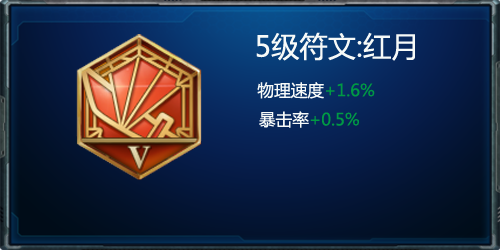
<style>
.page{position:relative;width:500px;height:250px}
.page>*{position:absolute;margin:0}
.t1{font:28.3px "MicrosoftYaHei";color:#f7faf8}
.t2{font:16.7px "MicrosoftYaHei";color:#f7faf8}
.t3{font:16.7px "MicrosoftYaHei";color:#009944}
</style>
<div class="page">
<p class="t1" style="left:256px;top:32px;width:159px;height:96px;text-align:center">5级符文:红月<br><span class="t2">        物理速度</span><span class="t3">+1.6%<br></span><span class="t2">  暴击率</span><span class="t3">+0.5%</span></p>
</div>
